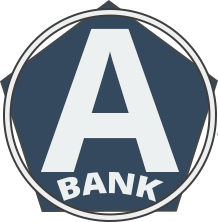
<style>
.page{position:relative;width:218px;height:222px;background:#34495e}
.page>*{position:absolute;margin:0}
.t1{font:200px "OpenSans-Bold";color:#ecf0f1}
.t2{font:30px "OpenSans-Extrabold";color:#ecf0f1}
</style>
<div class="page">
<p class="t1" style="left:41px;top:28px;width:138px;height:144px">A</p>
<p class="t2" style="left:56px;top:171px;width:108px;height:31px">BANK</p>
</div>
